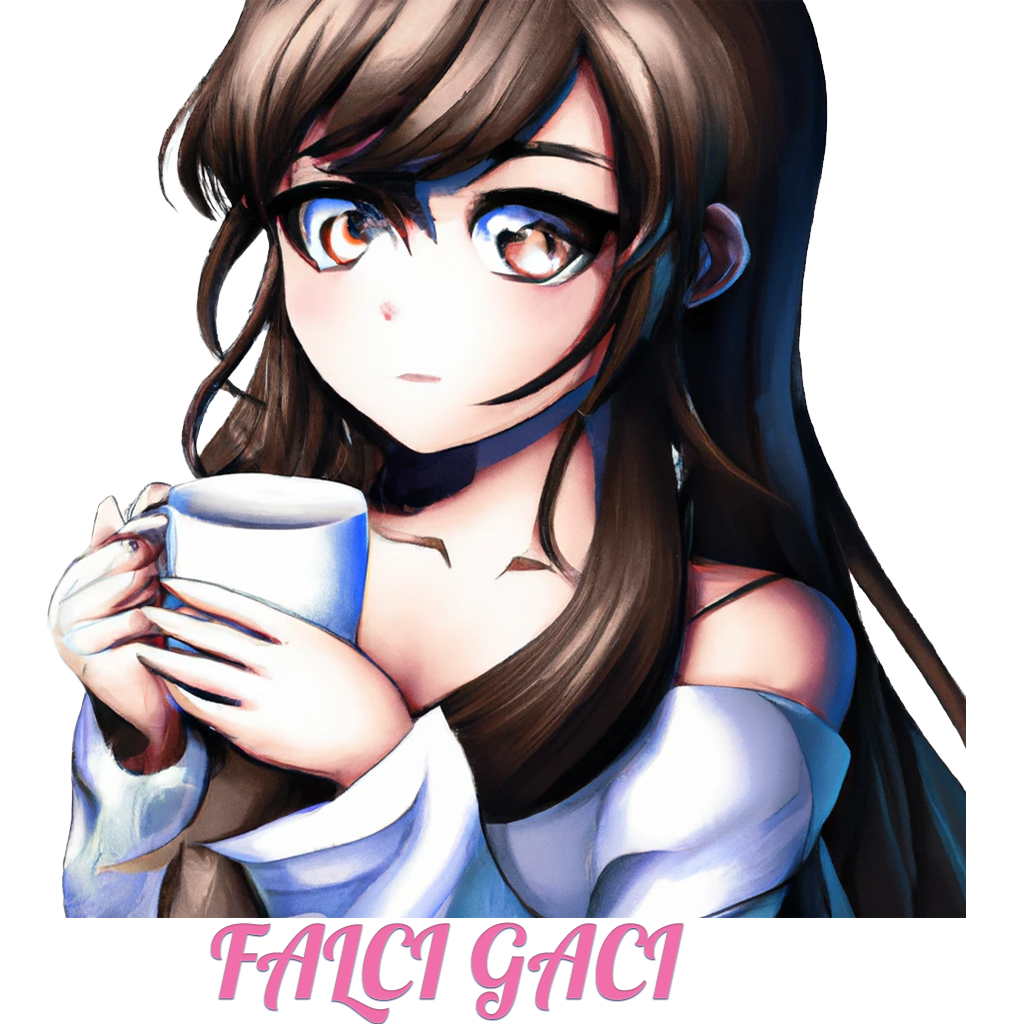
<style>
.page{position:relative;width:1024px;height:1024px;background:#ffffff}
.page>*{position:absolute;margin:0}
.t1{font:100px "Lobster-Regular";color:#f06eaa}
</style>
<div class="page">
<p class="t1" style="left:211px;top:922px;width:473px;height:102px">FALCI GACI</p>
</div>
